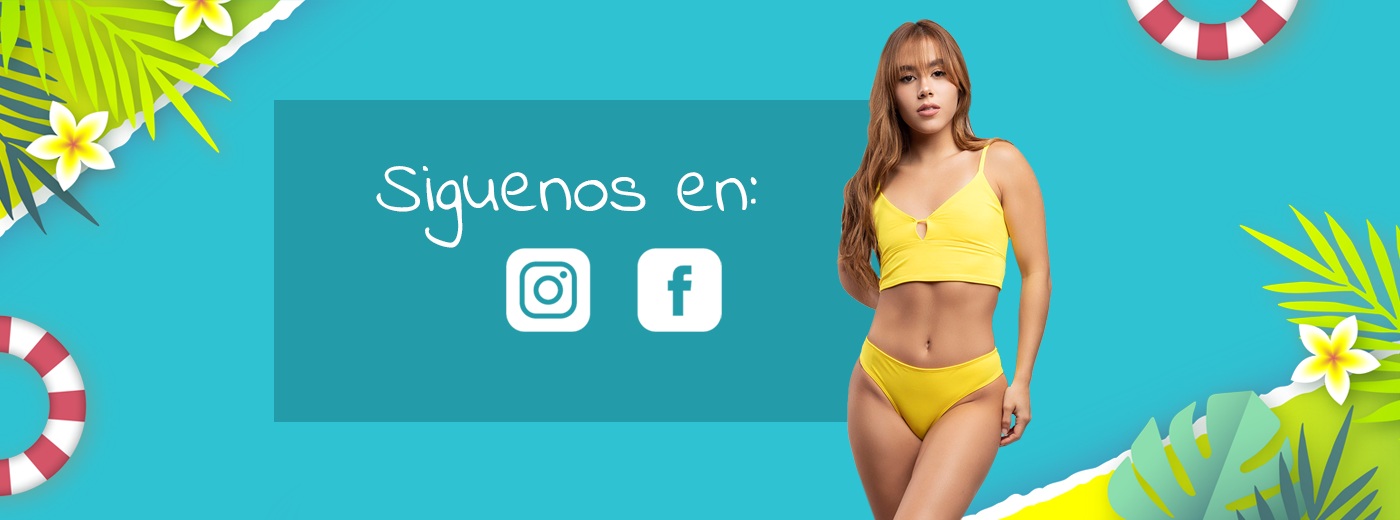
<style>
.page{position:relative;width:1400px;height:520px;background:#2fc2d2}
.page>*{position:absolute;margin:0}
.t1{font:74.8px "IndieFlower";color:#ffffff}
.t2{font:99.7px "IndieFlower";color:#ffffff}
</style>
<div class="page">
<p class="t1" style="left:376px;top:166px;width:381px;height:82px">Siguenos en<span class="t2">:</span></p>
</div>
